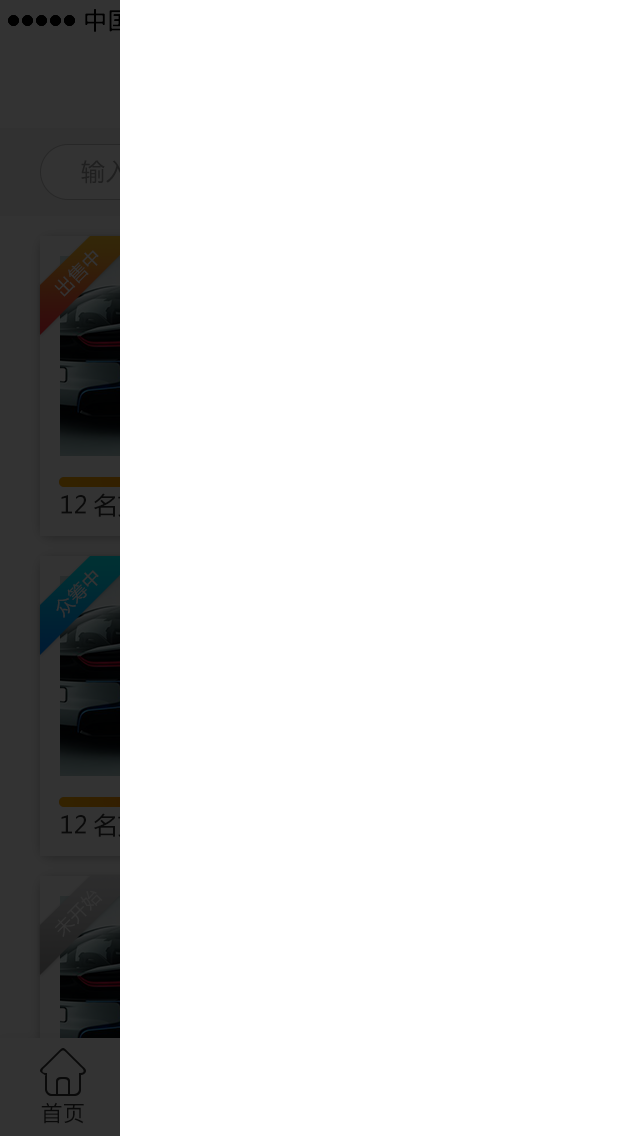
<style>
.page{position:relative;width:640px;height:1136px;background:#ffffff}
.page>*{position:absolute;margin:0}
.t1{font:18px "MicrosoftYaHei";letter-spacing:0.05em;color:#333333}
.t2{font:22px "PingFangSC-Regular";color:#0a0a0a}
</style>
<div class="page">
<p class="t1" style="left:54px;top:250px;width:45px;height:47px;rotate:-45deg">出售中</p>
<p class="t1" style="left:56px;top:570px;width:43px;height:48px;rotate:-45deg">众筹中</p>
<p class="t1" style="left:55px;top:890px;width:48px;height:47px;rotate:-45deg">未开始</p>
<p class="t2" style="left:41px;top:1102px;width:43px;height:22px">首页</p>
</div>
